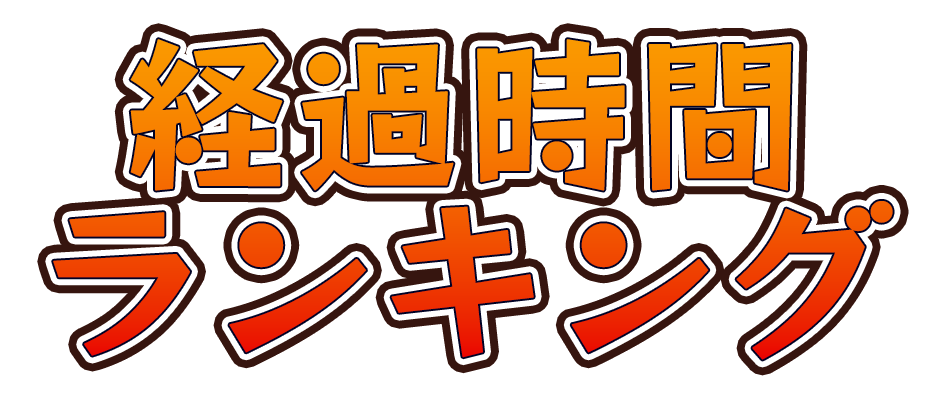
<style>
.page{position:relative;width:946px;height:398px;background:#ffffff}
.page>*{position:absolute;margin:0}
.t1{font:166.7px/166.7px "RocknRollOne-Regular";font-weight:bold}
</style>
<div class="page">
<p class="t1" style="left:53px;top:39px;width:840px;height:321px;text-align:center">経過時間<br>ランキング</p>
</div>
